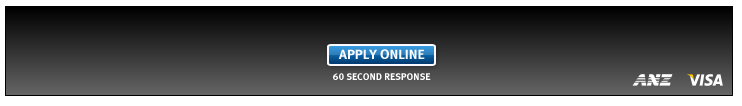
<style>
.page{position:relative;width:742px;height:106px}
.page>*{position:absolute;margin:0}
.t1{font:14px "MetaBoldLF-Roman";color:#fbfaff}
.t2{font:10px "MetaBoldLF-Roman";color:#ffffff}
</style>
<div class="page">
<p class="t1" style="left:338px;top:49px;width:87px;height:10px">APPLY ONLINE</p>
<p class="t2" style="left:333px;top:73px;width:98px;height:7px">60 SECOND RESPONSE</p>
</div>
